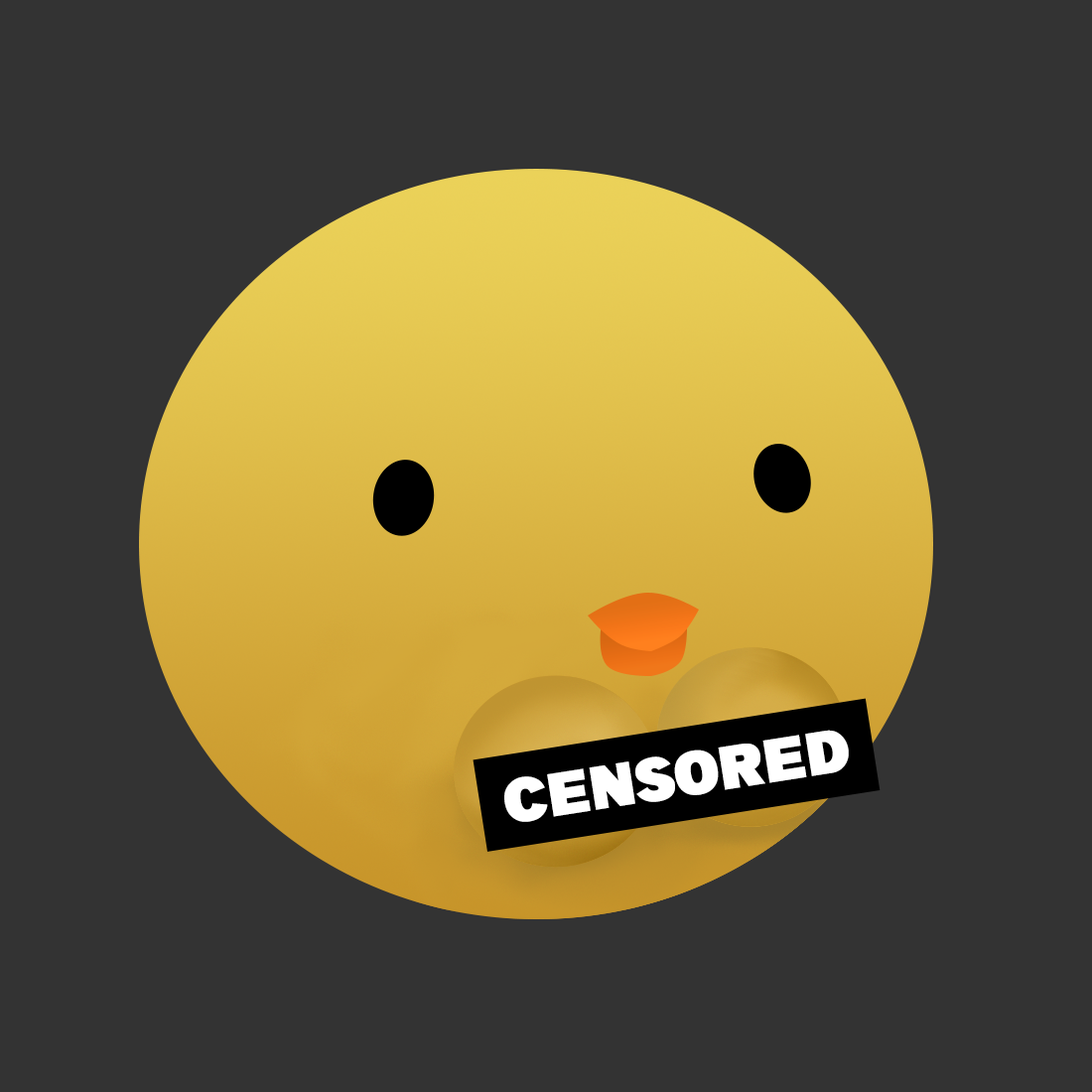
<style>
.page{position:relative;width:1092px;height:1092px;background:#333333}
.page>*{position:absolute;margin:0}
.t1{font:56.7px "aBigDeal";color:#ffffff}
</style>
<div class="page">
<p class="t1" style="left:504px;top:730px;width:345px;height:92px;rotate:-9deg">CENSORED</p>
</div>
